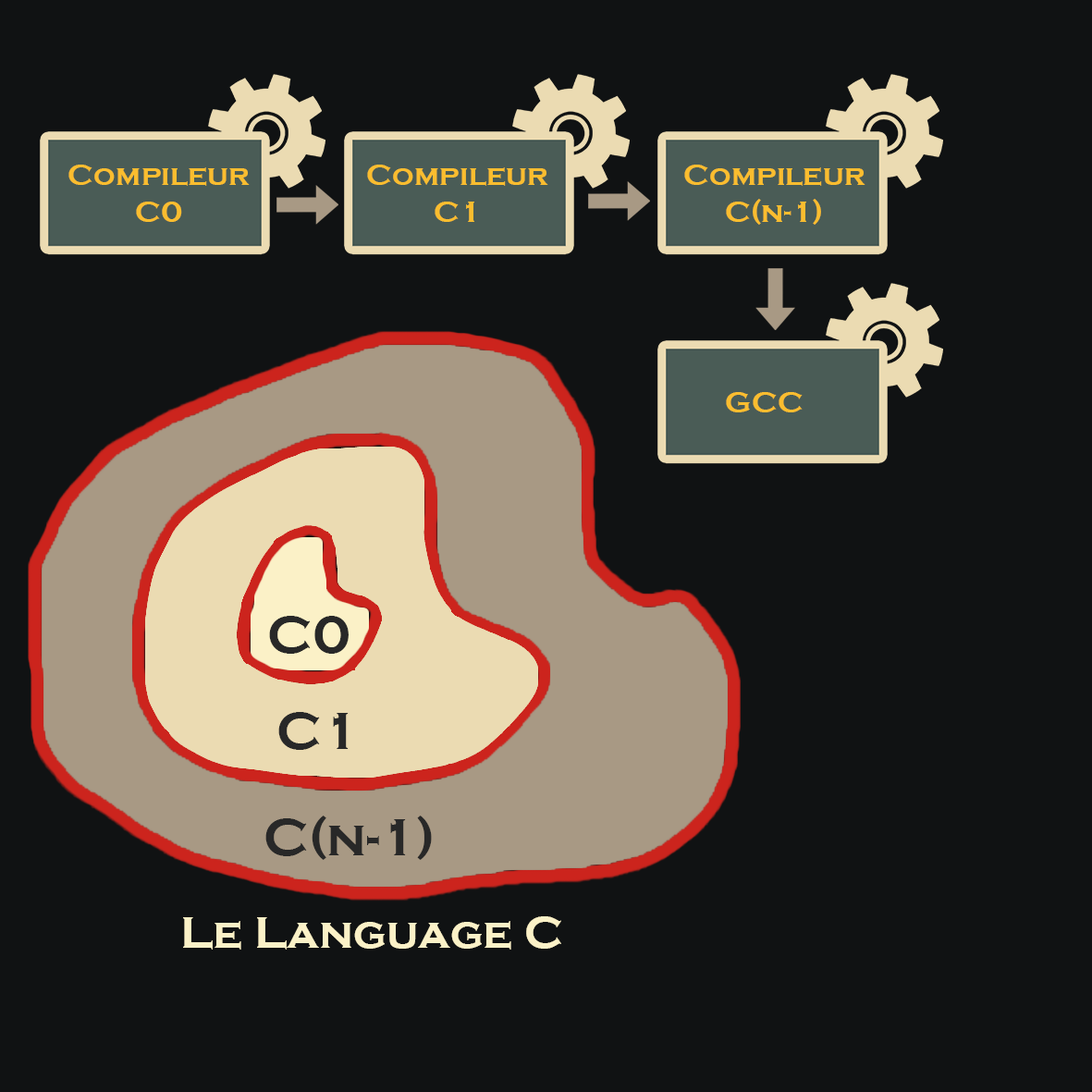
<style>
.page{position:relative;width:1092px;height:1092px;background:#101213}
.page>*{position:absolute;margin:0}
.t1{font:30.8px "CopperplateGothic-Bold";color:#fabd2f}
.t2{font:53.9px "CopperplateGothic-Bold";color:#282828}
.t3{font:46.2px "CopperplateGothic-Bold";color:#fbf1c7}
</style>
<div class="page">
<p class="t1" style="left:68px;top:165px;width:182px;height:57px;text-align:center">Compileur<br>C0</p>
<p class="t1" style="left:367px;top:165px;width:181px;height:57px;text-align:center">Compileur<br>C1</p>
<p class="t1" style="left:684px;top:165px;width:181px;height:60px;text-align:center">Compileur<br>C(n-1)</p>
<p class="t1" style="left:726px;top:392px;width:77px;height:20px">GCC</p>
<p class="t2" style="left:269px;top:616px;width:80px;height:38px">C0</p>
<p class="t2" style="left:278px;top:712px;width:71px;height:38px">C1</p>
<p class="t2" style="left:265px;top:816px;width:167px;height:44px">C(n-1)</p>
<p class="t3" style="left:183px;top:916px;width:378px;height:34px">Le Language C</p>
</div>
